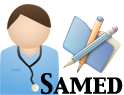
<style>
.page{position:relative;width:124px;height:95px;background:#ffffff}
.page>*{position:absolute;margin:0}
.t1{font:24px "CapitalsRegular";color:#000000}
</style>
<div class="page">
<p class="t1" style="left:41px;top:73px;width:82px;height:22px">Samed</p>
</div>
